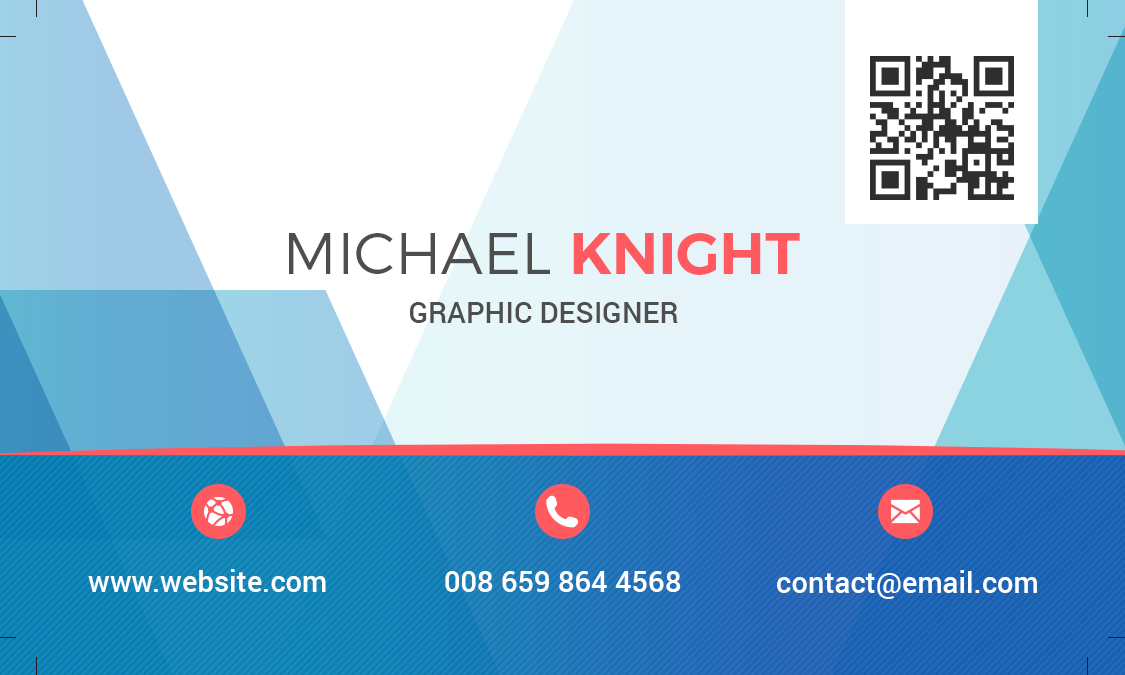
<style>
.page{position:relative;width:1125px;height:675px}
.page>*{position:absolute;margin:0}
.t1{font:58.5px "Montserrat-Light";color:#4e4e4e;text-transform:uppercase}
.t2{font:58.5px "Montserrat-SemiBold";color:#ff5a60;text-transform:uppercase}
.t3{font:29.2px "Roboto-Medium";color:#4e4e4e;text-transform:uppercase}
.t4{font:29.2px "Roboto-Medium";color:#ffffff}
</style>
<div class="page">
<p class="t1" style="left:289px;top:233px;width:511px;height:42px">Michael <span class="t2">Knight</span></p>
<p class="t3" style="left:410px;top:302px;width:268px;height:21px">Graphic designer</p>
<p class="t4" style="left:88px;top:569px;width:238px;height:23px">www.website.com</p>
<p class="t4" style="left:445px;top:571px;width:236px;height:21px">008 659 864 4568</p>
<p class="t4" style="left:777px;top:570px;width:260px;height:29px">contact@email.com</p>
</div>
